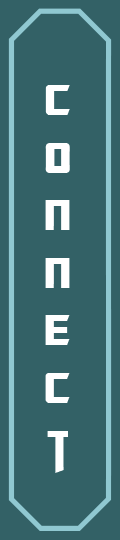
<style>
.page{position:relative;width:120px;height:540px;background:#336166}
.page>*{position:absolute;margin:0}
.t1{font:48px "TransformersMovie";color:#ffffff}
</style>
<div class="page">
<p class="t1" style="left:45px;top:85px;width:25px;height:388px;text-align:center">C<br>O<br>n<br>n<br>e<br>c<br>t</p>
</div>
